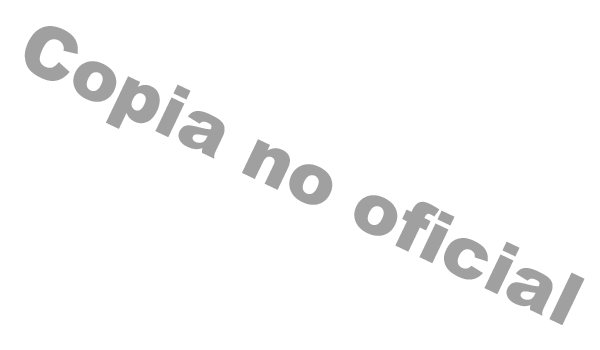
<style>
.page{position:relative;width:600px;height:350px;background:#ffffff}
.page>*{position:absolute;margin:0}
.t1{font:72px "Arial-Black";color:#a0a0a0}
</style>
<div class="page">
<p class="t1" style="left:24px;top:26px;width:561px;height:300px;rotate:26deg">Copia no oficial</p>
</div>
